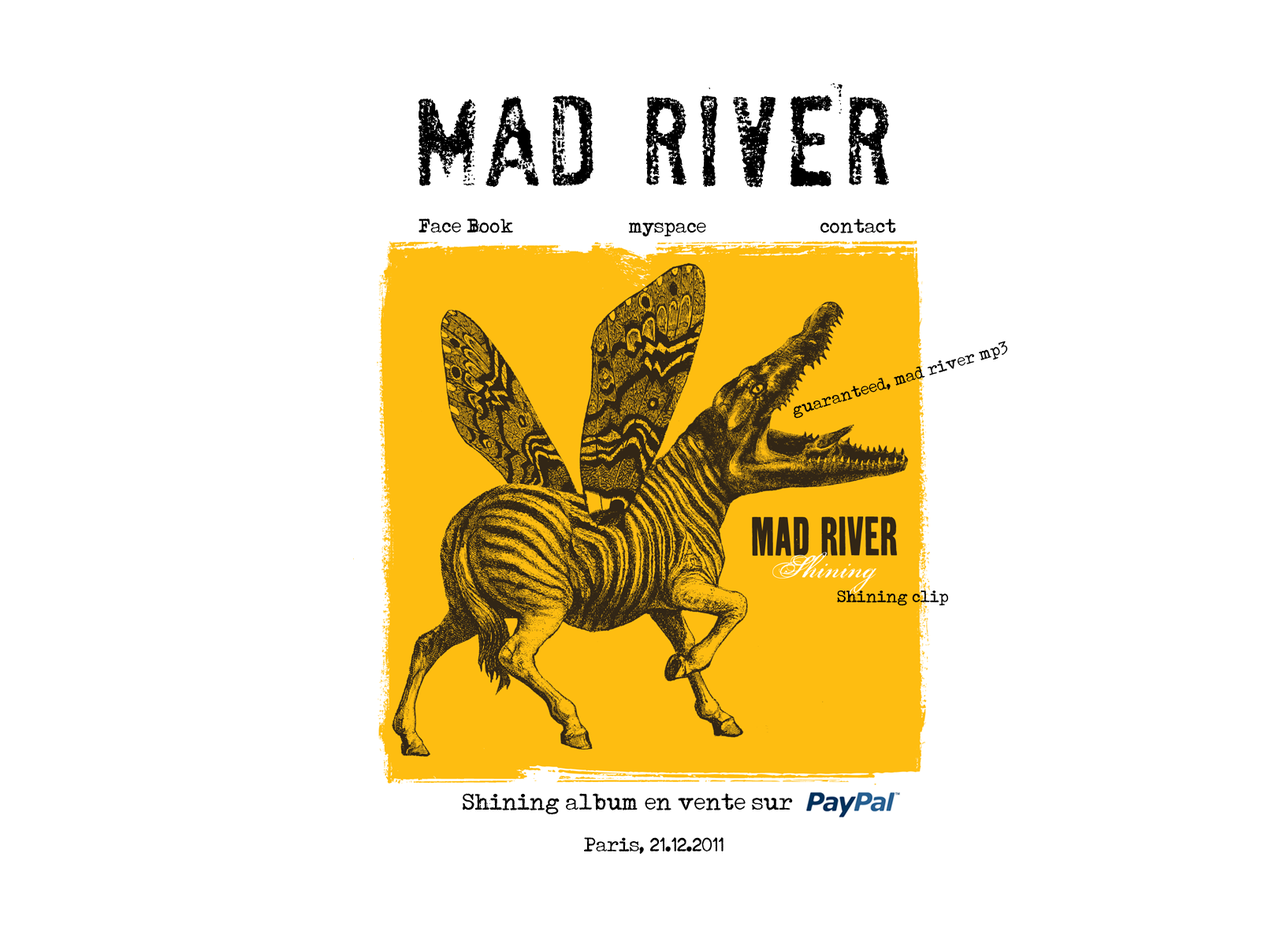
<style>
.page{position:relative;width:1261px;height:946px;background:#ffffff}
.page>*{position:absolute;margin:0}
.t1{font:116.8px "SociaLAnimaL";color:#000000}
.t2{font:19.7px "Typenoksidi";color:#000000}
.t3{font:16.7px "Typenoksidi";color:#000000}
.t4{font:23px "Typenoksidi";color:#000000}
</style>
<div class="page">
<p class="t1" style="left:418px;top:83px;width:471px;height:105px">MAD RIVER</p>
<p class="t2" style="left:418px;top:218px;width:95px;height:15px">Face Book</p>
<p class="t2" style="left:820px;top:218px;width:76px;height:15px">contact</p>
<p class="t2" style="left:628px;top:222px;width:78px;height:14px">myspace</p>
<p class="t3" style="left:793px;top:340px;width:215px;height:78px;rotate:-17deg">guaranteed, mad river mp3</p>
<p class="t3" style="left:837px;top:590px;width:111px;height:16px">Shining clip</p>
<p class="t4" style="left:463px;top:793px;width:330px;height:21px">Shining album en vente sur</p>
<p class="t2" style="left:584px;top:837px;width:139px;height:17px">Paris, 21.12.2011</p>
</div>
